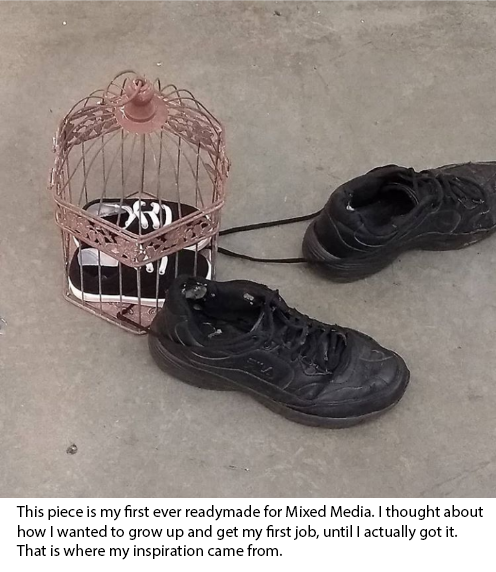
<style>
.page{position:relative;width:496px;height:572px}
.page>*{position:absolute;margin:0}
.t1{font:16px "MyriadPro-Regular";color:#000000}
</style>
<div class="page">
<p class="t1" style="left:16px;top:505px;width:467px;height:55px">This piece is my first ever readymade for Mixed Media. I thought about how I wanted to grow up and get my first job, until I actually got it. That is where my inspiration came from.</p>
</div>
